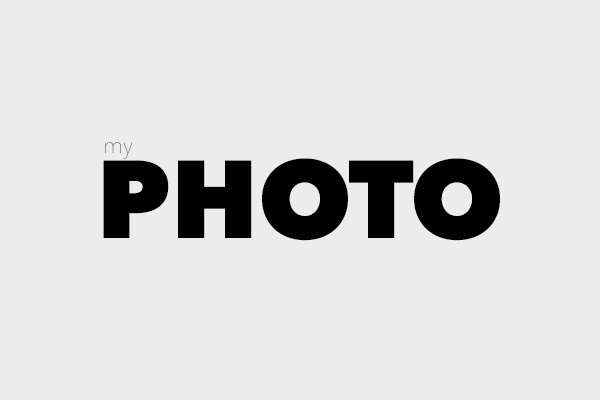
<style>
.page{position:relative;width:600px;height:400px;background:#ececec}
.page>*{position:absolute;margin:0}
.t1{font:23px "AvenirNext-UltraLight"}
.t2{font:109px "AvenirNext-Heavy";color:#000000}
</style>
<div class="page">
<p class="t1" style="left:105px;top:142px;width:28px;height:17px">my</p>
<p class="t2" style="left:103px;top:158px;width:397px;height:83px">PHOTO</p>
</div>
